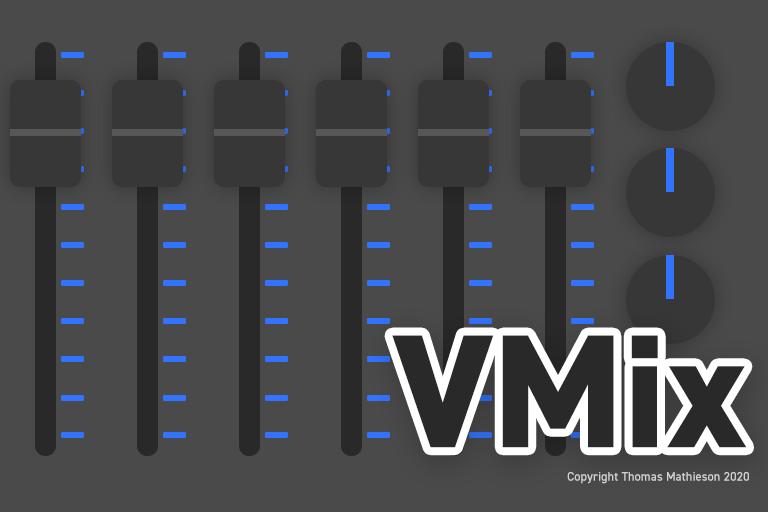
<style>
.page{position:relative;width:768px;height:512px;background:#4a4a4a}
.page>*{position:absolute;margin:0}
.t1{font:161.9px "DIN2014-ExtraBold";color:#292929}
.t2{font:12.5px "DIN2014-Demi";color:#d2d2d2}
</style>
<div class="page">
<p class="t1" style="left:392px;top:335px;width:355px;height:113px">VMix</p>
<p class="t2" style="left:567px;top:472px;width:182px;height:12px">Copyright Thomas Mathieson 2020</p>
</div>
